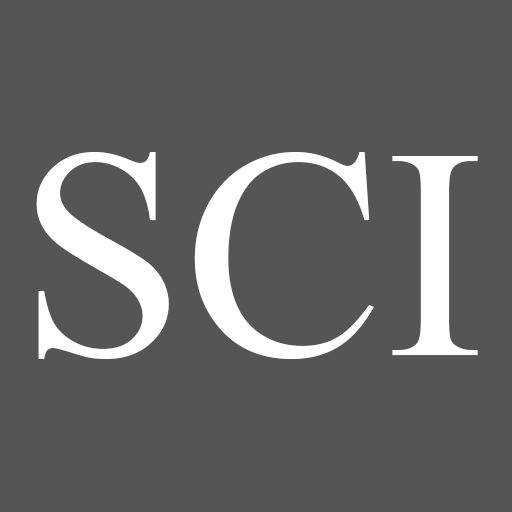
<style>
.page{position:relative;width:512px;height:512px;background:#555555}
.page>*{position:absolute;margin:0}
.t1{font:300px "TimesNewRomanPSMT";color:#ffffff}
</style>
<div class="page">
<p class="t1" style="left:36px;top:152px;width:442px;height:207px">SCI</p>
</div>
